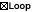
<style>
.page{position:relative;width:33px;height:12px;background:#ffffff}
.page>*{position:absolute;margin:0}
.t1{font:9px "Helvetica-Bold";color:#000000}
</style>
<div class="page">
<p class="t1" style="left:9px;top:2px;width:22px;height:9px">Loop</p>
</div>
